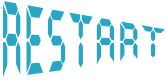
<style>
.page{position:relative;width:166px;height:81px;background:#ffffff}
.page>*{position:absolute;margin:0}
.t1{font:75px "QuartzMS";color:#28a6c4;scale:0.5 1}
</style>
<div class="page">
<p class="t1" style="left:3px;top:1px;width:162px;height:76px">RESTART</p>
</div>
